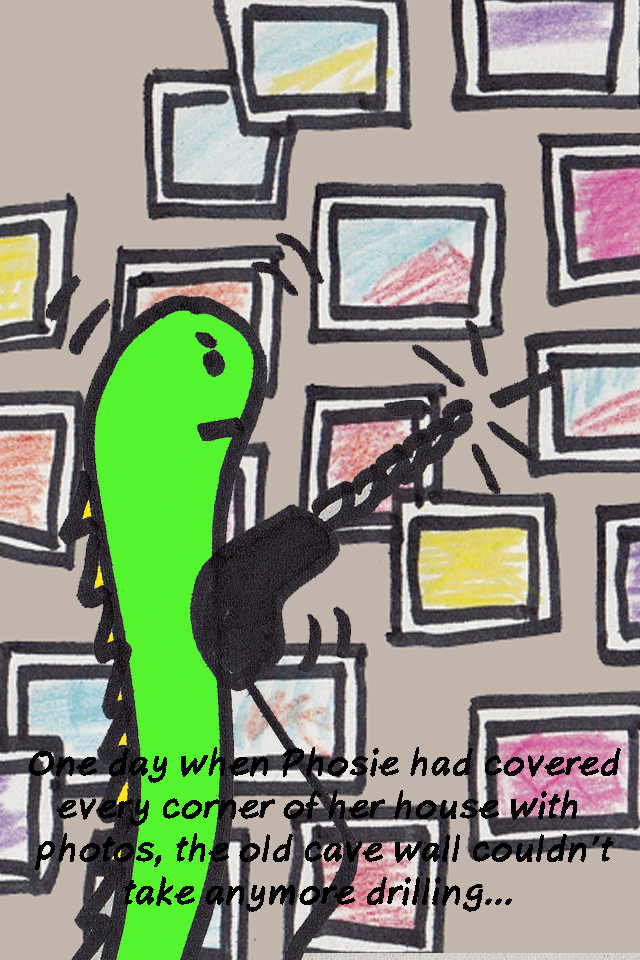
<style>
.page{position:relative;width:640px;height:960px;background:#c1b5ac}
.page>*{position:absolute;margin:0}
.t1{font:36px "AxureHandwriting-BoldItalic";color:#000000}
</style>
<div class="page">
<p class="t1" style="left:29px;top:747px;width:592px;height:165px;text-align:center">One day when Phosie had covered<br>every corner of her house with <br>photos, the old cave wall couldn’t<br>take anymore drilling...</p>
</div>
